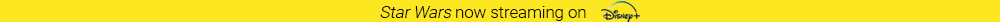
<style>
.page{position:relative;width:1000px;height:22px;background:#fde720}
.page>*{position:absolute;margin:0}
.t1{font:16.7px "Roboto-Light";color:#0c0c0c}
.t2{font:16.7px "Roboto-Light";color:#0c0c0c;font-style:italic}
</style>
<div class="page">
<p class="t1" style="left:380px;top:6px;width:206px;height:15px"><span class="t2">Star Wars </span>now streaming on</p>
</div>
